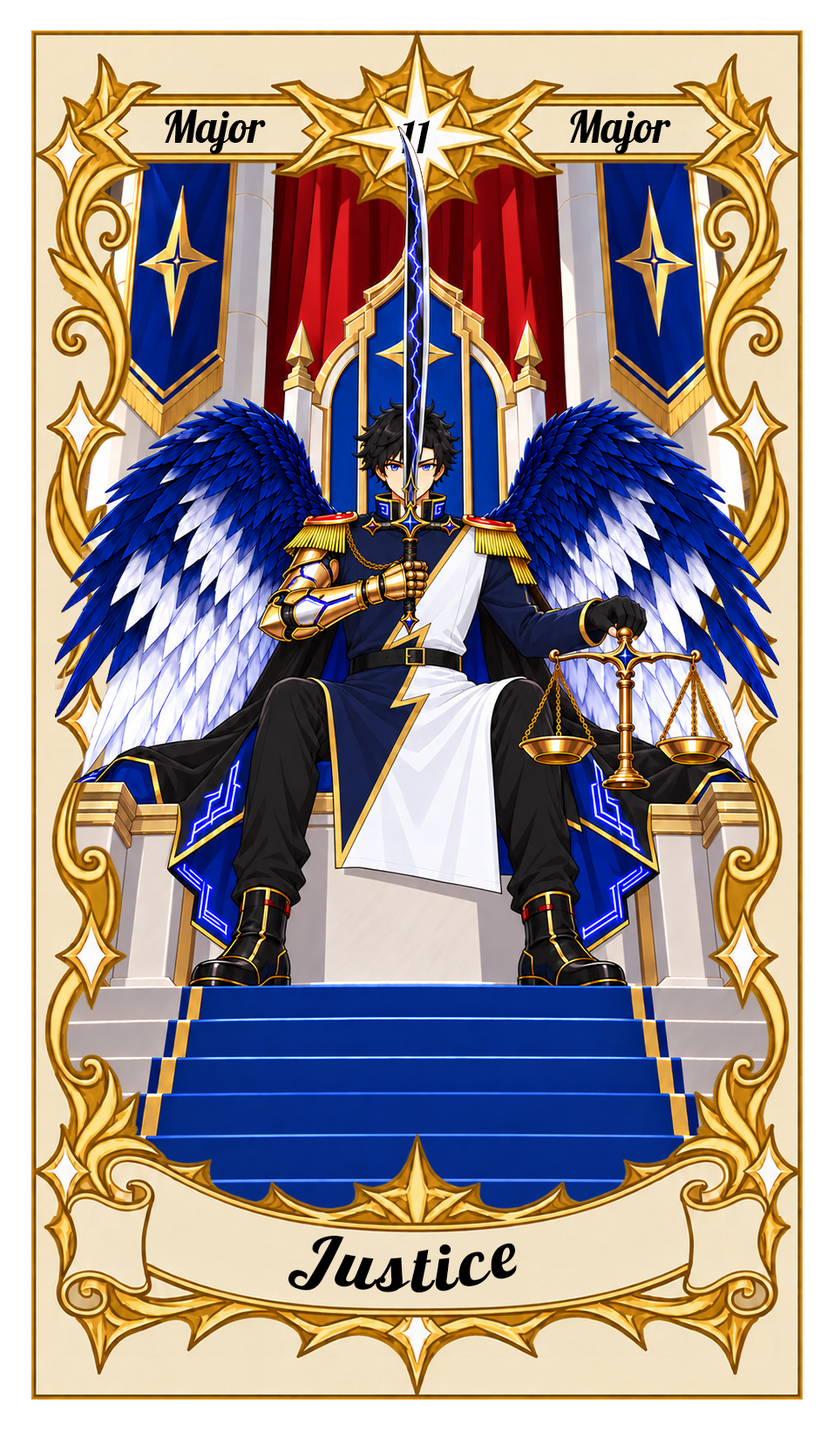
<style>
.page{position:relative;width:834px;height:1430px}
.page>*{position:absolute;margin:0}
.t1{font:43.6px "Lobster-Regular";color:#000000}
.t2{font:65.3px "Lobster-Regular";letter-spacing:0.05em;color:#000000}
</style>
<div class="page">
<p class="t1" style="left:165px;top:110px;width:101px;height:44px">Major</p>
<p class="t1" style="left:570px;top:110px;width:101px;height:44px">Major</p>
<p class="t1" style="left:402px;top:120px;width:28px;height:33px">11</p>
<p class="t2" style="left:287px;top:1235px;width:230px;height:59px">Justice</p>
</div>
